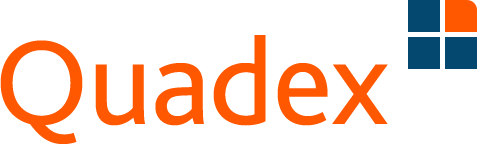
<style>
.page{position:relative;width:477px;height:144px;background:#ffffff}
.page>*{position:absolute;margin:0}
.t1{font:125.7px "Bliss2";letter-spacing:-0.01em;color:#ff5800}
</style>
<div class="page">
<p class="t1" style="left:0px;top:35px;width:388px;height:109px">Quadex</p>
</div>
